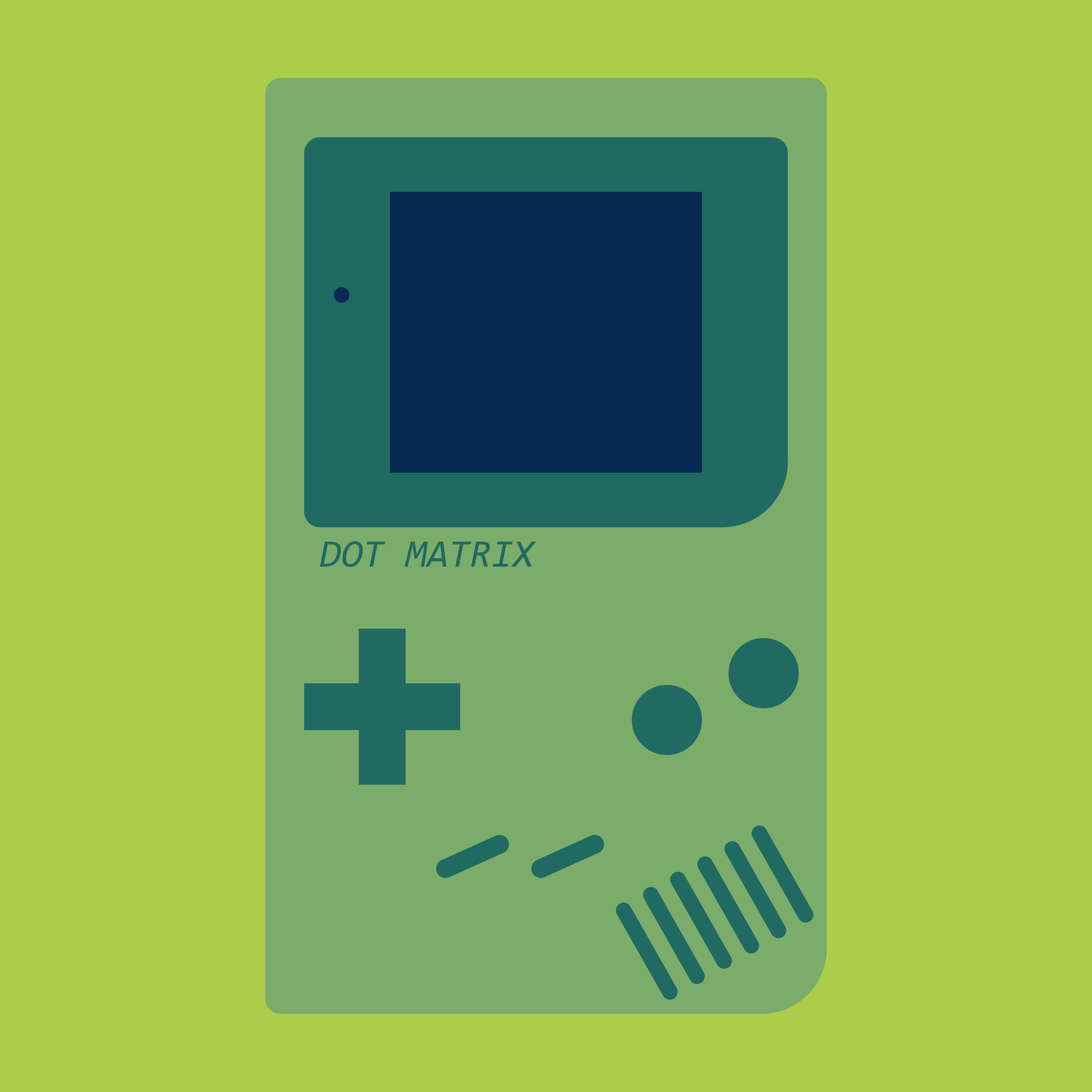
<style>
.page{position:relative;width:1092px;height:1092px;background:#accd4a}
.page>*{position:absolute;margin:0}
.t1{font:39px "Consolas-Italic";color:#206a62}
</style>
<div class="page">
<p class="t1" style="left:320px;top:541px;width:216px;height:26px">DOT MATRIX</p>
</div>
